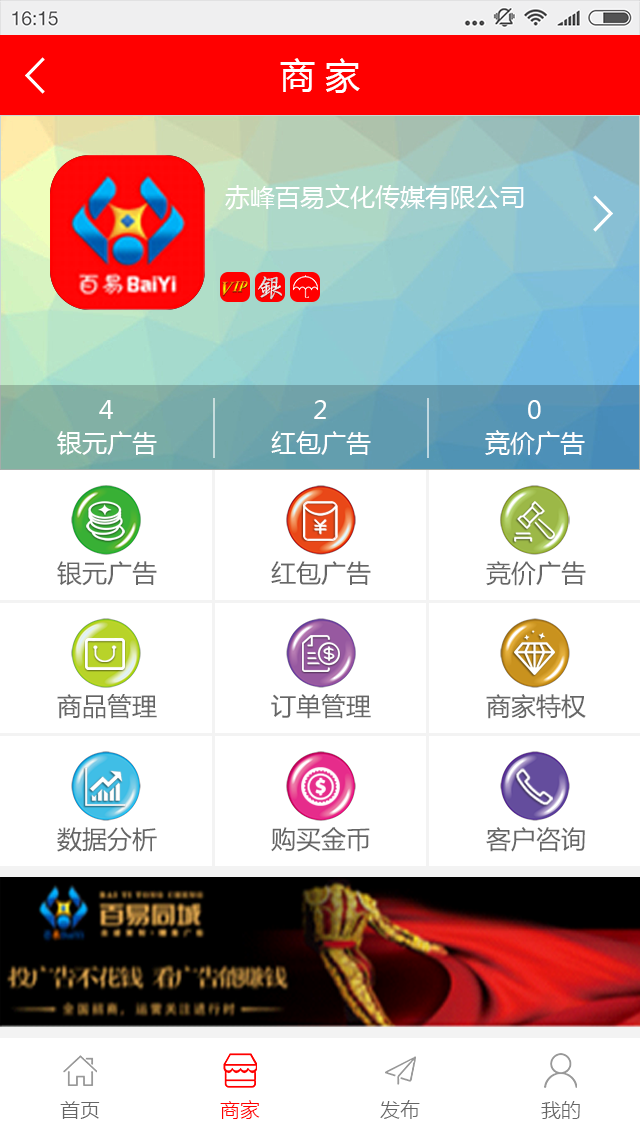
<style>
.page{position:relative;width:640px;height:1136px;background:#ffffff}
.page>*{position:absolute;margin:0}
.t1{font:35px "MicrosoftYaHei";color:#ffffff}
.t2{font:25px "MicrosoftYaHei";color:#ffffff}
.t3{font:26.2px "FZQTFW--GB1-0";color:#e9e9e9}
.t4{font:25px "MicrosoftYaHei";color:#666666}
.t5{font:20px "MicrosoftYaHeiLight";color:#666666}
.t6{font:20px "MicrosoftYaHeiLight";color:#ff0000}
</style>
<div class="page">
<p class="t1" style="left:280px;top:58px;width:80px;height:35px">商 家</p>
<p class="t2" style="left:225px;top:184px;width:299px;height:26px">赤峰百易文化传媒有限公司</p>
<p class="t3" style="left:258px;top:276px;width:24px;height:24px">银</p>
<p class="t2" style="left:99px;top:400px;width:14px;height:19px">4</p>
<p class="t2" style="left:314px;top:400px;width:12px;height:19px">2</p>
<p class="t2" style="left:528px;top:400px;width:13px;height:19px">0</p>
<p class="t2" style="left:57px;top:431px;width:100px;height:24px">银元广告</p>
<p class="t2" style="left:271px;top:431px;width:100px;height:24px">红包广告</p>
<p class="t2" style="left:485px;top:430px;width:100px;height:25px">竞价广告</p>
<p class="t4" style="left:57px;top:561px;width:100px;height:25px">银元广告</p>
<p class="t4" style="left:271px;top:561px;width:100px;height:24px">红包广告</p>
<p class="t4" style="left:486px;top:561px;width:100px;height:25px">竞价广告</p>
<p class="t4" style="left:57px;top:694px;width:100px;height:25px">商品管理</p>
<p class="t4" style="left:271px;top:694px;width:100px;height:25px">订单管理</p>
<p class="t4" style="left:486px;top:694px;width:100px;height:25px">商家特权</p>
<p class="t4" style="left:57px;top:827px;width:100px;height:25px">数据分析</p>
<p class="t4" style="left:271px;top:827px;width:99px;height:25px">购买金币</p>
<p class="t4" style="left:486px;top:827px;width:99px;height:25px">客户咨询</p>
<p class="t5" style="left:60px;top:1101px;width:40px;height:18px">首页</p>
<p class="t6" style="left:220px;top:1100px;width:40px;height:19px">商家</p>
<p class="t5" style="left:380px;top:1100px;width:40px;height:19px">发布</p>
<p class="t5" style="left:541px;top:1101px;width:39px;height:18px">我的</p>
</div>
